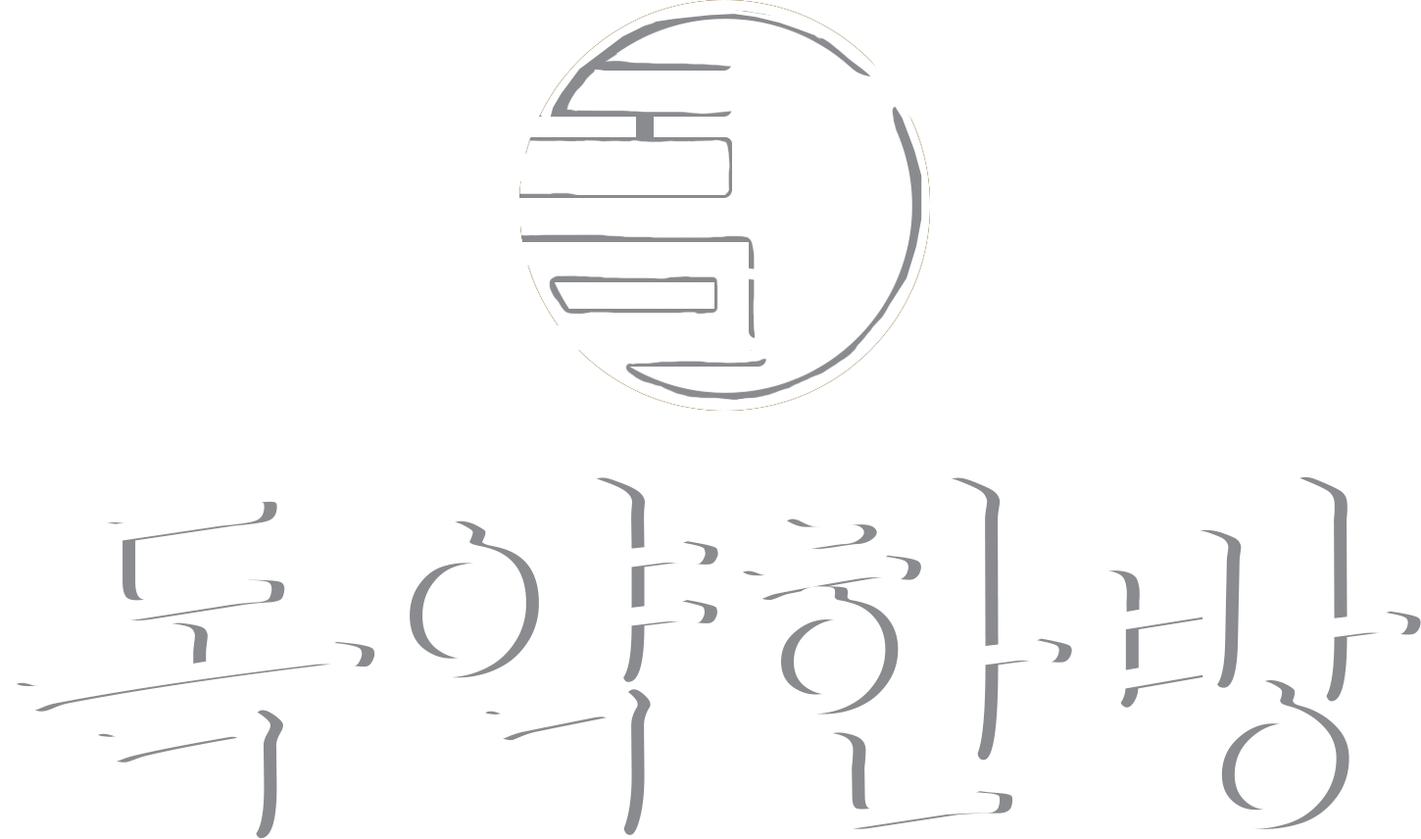
<style>
.page{position:relative;width:1421px;height:839px;background:#ffffff}
.page>*{position:absolute;margin:0}
.t1{font:408.2px "KoreanPGS-B"}
</style>
<div class="page">
<p class="t1" style="left:13px;top:476px;width:1408px;height:363px">독약한방</p>
</div>
